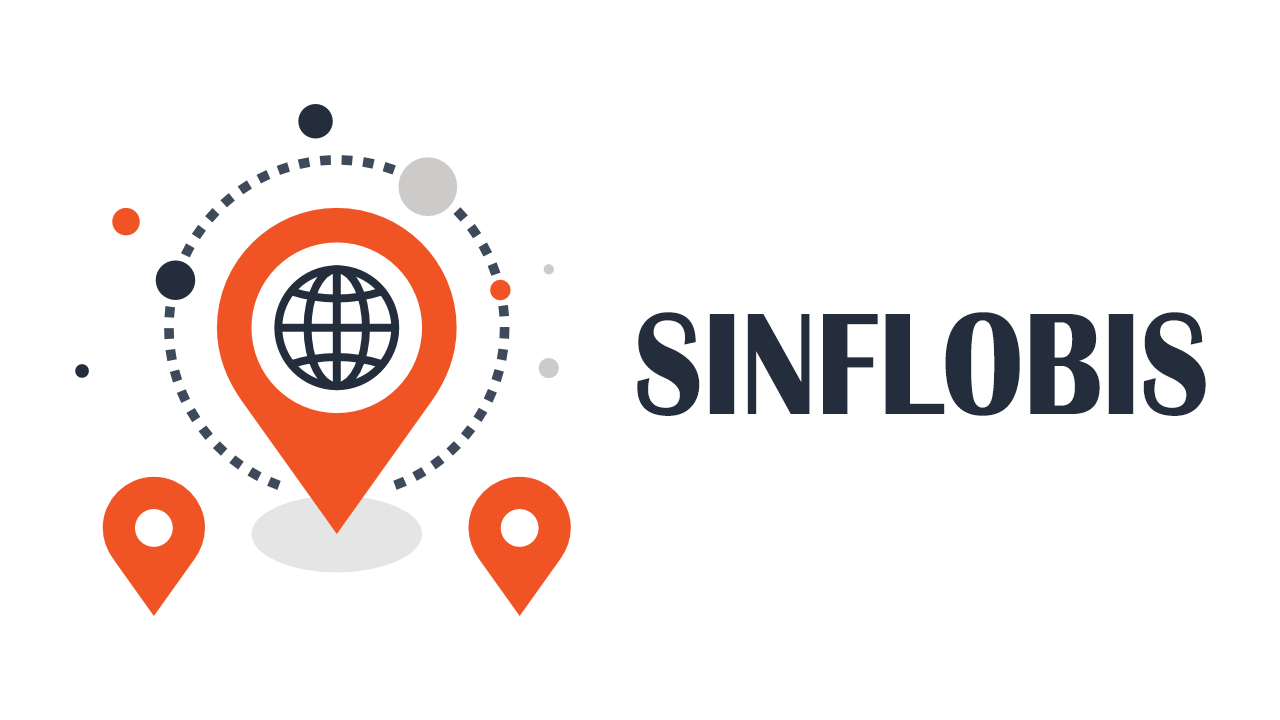
<style>
.page{position:relative;width:1280px;height:720px;background:#ffffff}
.page>*{position:absolute;margin:0}
.t1{font:150px "BritannicBold";color:#242d3c;scale:0.83 1}
</style>
<div class="page">
<p class="t1" style="left:637px;top:312px;width:569px;height:104px">SINFLOBIS</p>
</div>
